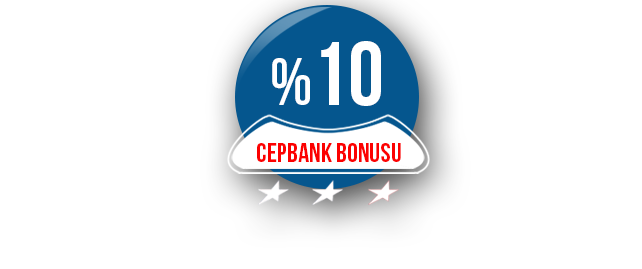
<style>
.page{position:relative;width:642px;height:269px;background:#ffffff}
.page>*{position:absolute;margin:0}
.t1{font:90px "BebasNeue";color:#ffffff;text-transform:uppercase}
.t2{font:67px "BebasNeue";color:#ffffff;text-transform:uppercase}
.t3{font:27.2px "BebasNeue";color:#fc0101;text-transform:uppercase}
</style>
<div class="page">
<p class="t1" style="left:272px;top:41px;width:109px;height:65px"><span class="t2">%</span>10</p>
<p class="t3" style="left:257px;top:143px;width:144px;height:19px">cepbank bonusu</p>
</div>
